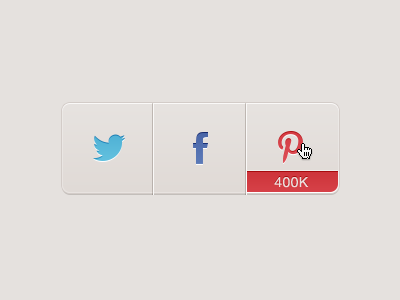
<style>
.page{position:relative;width:400px;height:300px;background:#e5e1de}
.page>*{position:absolute;margin:0}
.t1{font:14px "HelveticaNeue";letter-spacing:0.01em;text-transform:uppercase}
</style>
<div class="page">
<p class="t1" style="left:274px;top:176px;width:35px;height:11px">400k</p>
</div>
